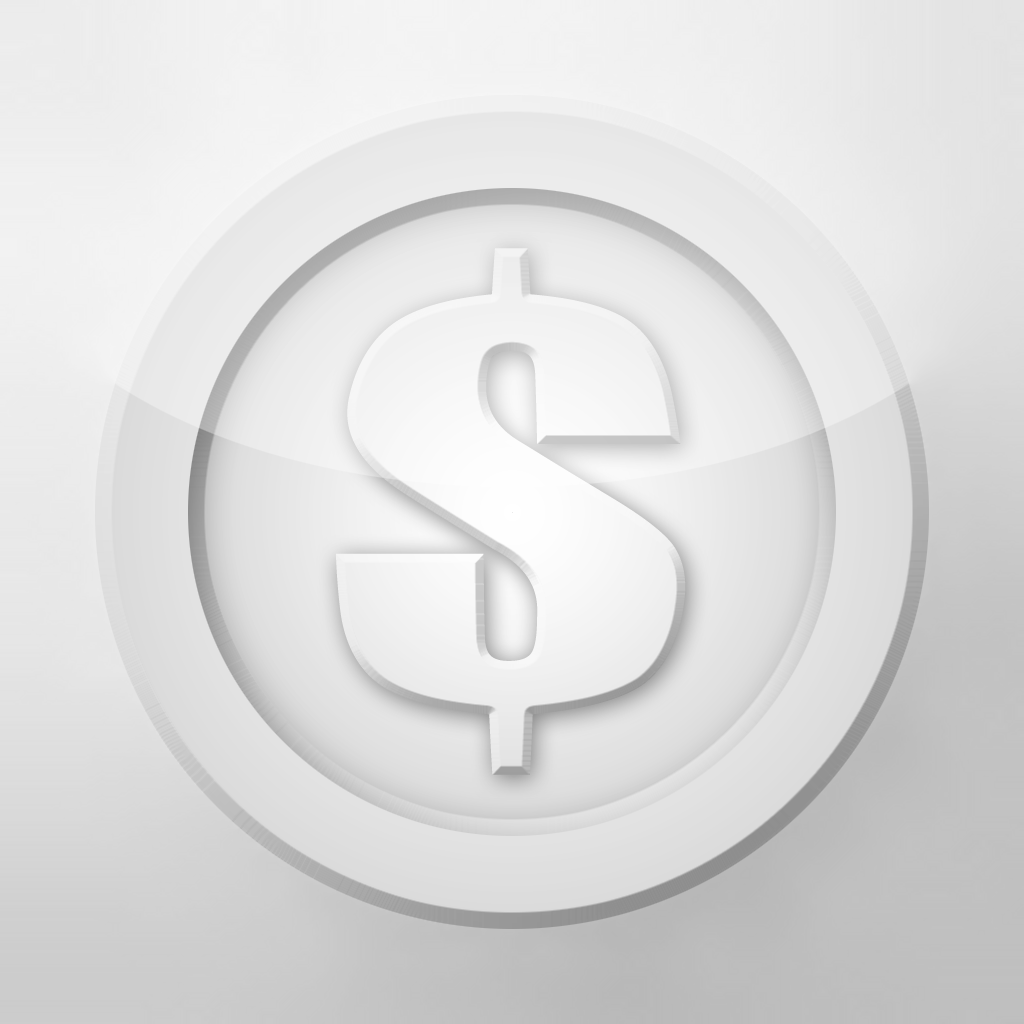
<style>
.page{position:relative;width:1024px;height:1024px}
.page>*{position:absolute;margin:0}
.t1{font:571.5px "Swiss911BT-ExtraCompressed";color:#f4f4f4}
</style>
<div class="page">
<p class="t1" style="left:336px;top:248px;width:350px;height:527px">$</p>
</div>
